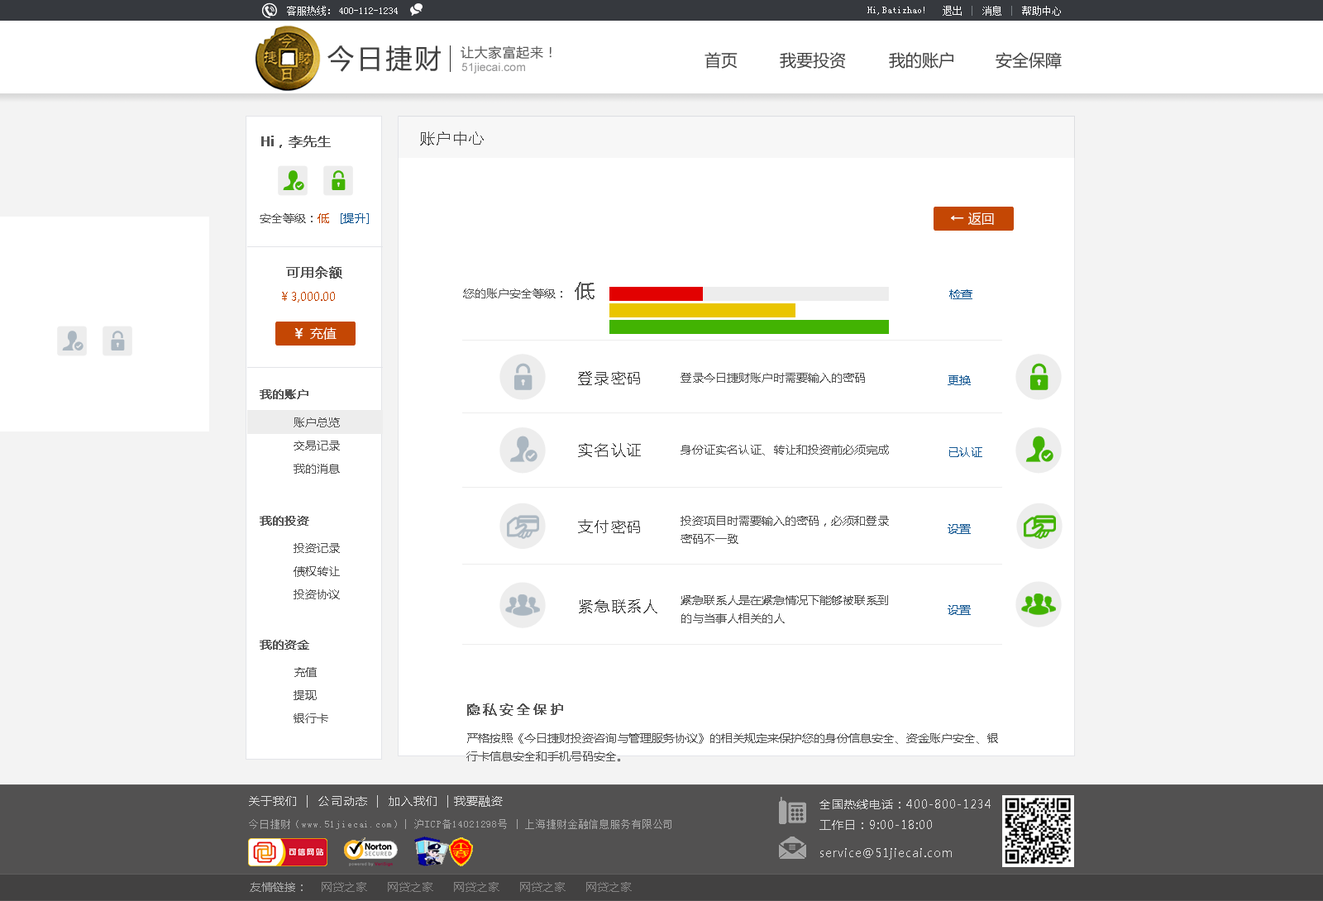
<style>
.page{position:relative;width:1323px;height:901px;background:#ffffff}
.page>*{position:absolute;margin:0}
.t1{font:9.9px "SimSun";color:#ffffff}
.t2{font:26.5px "MicrosoftYaHei";letter-spacing:0.1em;color:#3f3f3f}
.t3{font:13.2px "MicrosoftYaHei";letter-spacing:0.05em;color:#575757}
.t4{font:16.5px "MicrosoftYaHei";color:#414141}
.t5{font:11.6px "ArialMT";color:#969697}
.t6{font:13.2px "MicrosoftYaHei";color:#545454;font-weight:bold}
.t7{font:14.9px "MicrosoftYaHei";letter-spacing:0.1em;color:#3f3f3f}
.t8{font:11.6px "MicrosoftYaHei";color:#545454}
.t9{font:11.6px "MicrosoftYaHei";color:#c44704}
.t10{font:11.6px "MicrosoftYaHei";color:#175a94}
.t11{font:13.2px "MicrosoftYaHei";color:#ffffff}
.t12{font:13.2px "MicrosoftYaHei";color:#ffffff;font-weight:bold}
.t13{font:19.8px "MicrosoftYaHei";letter-spacing:0.1em;color:#545454}
.t14{font:11.6px "MicrosoftYaHei";color:#c44703}
.t15{font:11.6px "MicrosoftYaHei";color:#545454;font-weight:bold}
.t16{font:11.6px/23.2px "MicrosoftYaHei";color:#545454}
.t17{font:11.6px/18.2px "MicrosoftYaHei";color:#545454}
.t18{font:13.2px "MicrosoftYaHei";letter-spacing:0.2em;color:#545454;font-weight:bold}
.t19{font:11.6px "MicrosoftYaHei";letter-spacing:0.07em;color:#dbdbdb}
.t20{font:11.6px "MicrosoftYaHei";letter-spacing:0.07em;color:#dadada}
.t21{font:9.9px "SimSun";letter-spacing:0.07em;color:#a7a7a7}
.t22{font:11.6px "MicrosoftYaHei";color:#858484}
.t23{font:11.6px "MicrosoftYaHei";color:#a7a7a7}
</style>
<div class="page">
<p class="t1" style="left:287px;top:6px;width:43px;height:10px">客服热线：</p>
<p class="t1" style="left:943px;top:6px;width:118px;height:10px">退出    消息    帮助中心</p>
<p class="t1" style="left:339px;top:7px;width:59px;height:7px">400-112-1234</p>
<p class="t1" style="left:867px;top:7px;width:57px;height:8px">Hi,Batizhao!</p>
<p class="t2" style="left:327px;top:45px;width:114px;height:27px">今日捷财</p>
<p class="t3" style="left:461px;top:45px;width:91px;height:14px">让大家富起来！</p>
<p class="t4" style="left:705px;top:52px;width:33px;height:17px">首页</p>
<p class="t4" style="left:780px;top:52px;width:66px;height:17px">我要投资</p>
<p class="t4" style="left:889px;top:52px;width:64px;height:17px">我的账户</p>
<p class="t4" style="left:996px;top:52px;width:66px;height:17px">安全保障</p>
<p class="t5" style="left:461px;top:63px;width:64px;height:11px">51jiecai.com</p>
<p class="t6" style="left:261px;top:136px;width:70px;height:12px">Hi，李先生</p>
<p class="t7" style="left:420px;top:131px;width:64px;height:15px">账户中心</p>
<p class="t8" style="left:260px;top:213px;width:109px;height:11px">安全等级：<span class="t9">低   </span><span class="t10">[提升]</span></p>
<p class="t11" style="left:951px;top:213px;width:43px;height:12px"><span class="t12">← </span>返回</p>
<p class="t6" style="left:286px;top:266px;width:56px;height:13px">可用余额</p>
<p class="t13" style="left:575px;top:282px;width:20px;height:18px">低</p>
<p class="t14" style="left:282px;top:292px;width:53px;height:11px">￥3,000.00</p>
<p class="t8" style="left:463px;top:289px;width:99px;height:10px">您的账户安全等级：</p>
<p class="t10" style="left:949px;top:289px;width:23px;height:10px">检查</p>
<p class="t11" style="left:294px;top:327px;width:43px;height:13px"><span class="t12">￥ </span>充值</p>
<p class="t7" style="left:578px;top:371px;width:62px;height:14px">登录密码</p>
<p class="t8" style="left:681px;top:373px;width:184px;height:10px">登录今日捷财账户时需要输入的密码</p>
<p class="t10" style="left:948px;top:375px;width:23px;height:10px">更换</p>
<p class="t15" style="left:260px;top:389px;width:48px;height:10px">我的账户</p>
<p class="t16" style="left:294px;top:418px;width:46px;height:56px">账户总览<br>交易记录<br>我的消息</p>
<p class="t7" style="left:578px;top:443px;width:63px;height:14px">实名认证</p>
<p class="t8" style="left:681px;top:445px;width:208px;height:11px">身份证实名认证、转让和投资前必须完成</p>
<p class="t10" style="left:949px;top:447px;width:33px;height:10px">已认证</p>
<p class="t15" style="left:260px;top:516px;width:49px;height:10px">我的投资</p>
<p class="t7" style="left:578px;top:519px;width:62px;height:15px">支付密码</p>
<p class="t17" style="left:681px;top:516px;width:208px;height:28px">投资项目时需要输入的密码，必须和登录<br>密码不一致</p>
<p class="t10" style="left:948px;top:524px;width:23px;height:10px">设置</p>
<p class="t16" style="left:294px;top:543px;width:46px;height:56px">投资记录<br>债权转让<br>投资协议</p>
<p class="t7" style="left:579px;top:599px;width:78px;height:15px">紧急联系人</p>
<p class="t17" style="left:681px;top:595px;width:207px;height:28px">紧急联系人是在紧急情况下能够被联系到<br>的与当事人相关的人</p>
<p class="t10" style="left:948px;top:605px;width:23px;height:10px">设置</p>
<p class="t15" style="left:260px;top:640px;width:49px;height:10px">我的资金</p>
<p class="t16" style="left:294px;top:667px;width:34px;height:57px">充值<br>提现<br>银行卡</p>
<p class="t18" style="left:467px;top:704px;width:96px;height:12px">隐私安全保护</p>
<p class="t17" style="left:466px;top:733px;width:532px;height:29px">严格按照《今日捷财投资咨询与管理服务协议》的相关规定来保护您的身份信息安全、资金账户安全、银行卡信息安全和手机号码安全。</p>
<p class="t19" style="left:249px;top:795px;width:254px;height:13px">关于我们  |  公司动态  |  加入我们  | 我要融资</p>
<p class="t20" style="left:819px;top:800px;width:172px;height:30px">全国热线电话：400-800-1234<br>工作日：9:00-18:00</p>
<p class="t21" style="left:249px;top:819px;width:422px;height:10px">今日捷财（www.51jiecai.com）| 沪ICP备14021298号 | 上海捷财金融信息服务有限公司</p>
<p class="t20" style="left:820px;top:848px;width:132px;height:12px">service@51jiecai.com</p>
<p class="t22" style="left:250px;top:882px;width:382px;height:10px"><span class="t23">友情链接：</span>    网贷之家      网贷之家      网贷之家      网贷之家      网贷之家</p>
</div>
